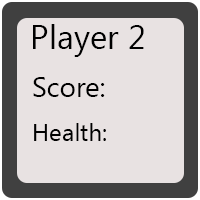
<style>
.page{position:relative;width:200px;height:200px;background:#e8e2e2}
.page>*{position:absolute;margin:0}
.t1{font:12px "SegoeUI";color:#000000}
.t2{font:27.8px "SegoeUI";color:#000000}
.t3{font:24.3px "SegoeUI";color:#000000}
</style>
<div class="page">
<p class="t1" style="left:33px;top:24px;width:111px;height:33px">Player 2</p>
<p class="t2" style="left:33px;top:77px;width:72px;height:20px">Score:</p>
<p class="t3" style="left:34px;top:123px;width:72px;height:18px">Health:</p>
</div>
